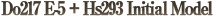
<style>
.page{position:relative;width:213px;height:18px;background:#ffffff}
.page>*{position:absolute;margin:0}
.t1{font:18px "RyuminPro-ExBold";letter-spacing:-0.1em;color:#4a3f32;font-weight:bold;scale:0.9 1}
</style>
<div class="page">
<p class="t1" style="left:1px;top:1px;width:212px;height:15px">Do217 E-5 + Hs293 Initial Model</p>
</div>
